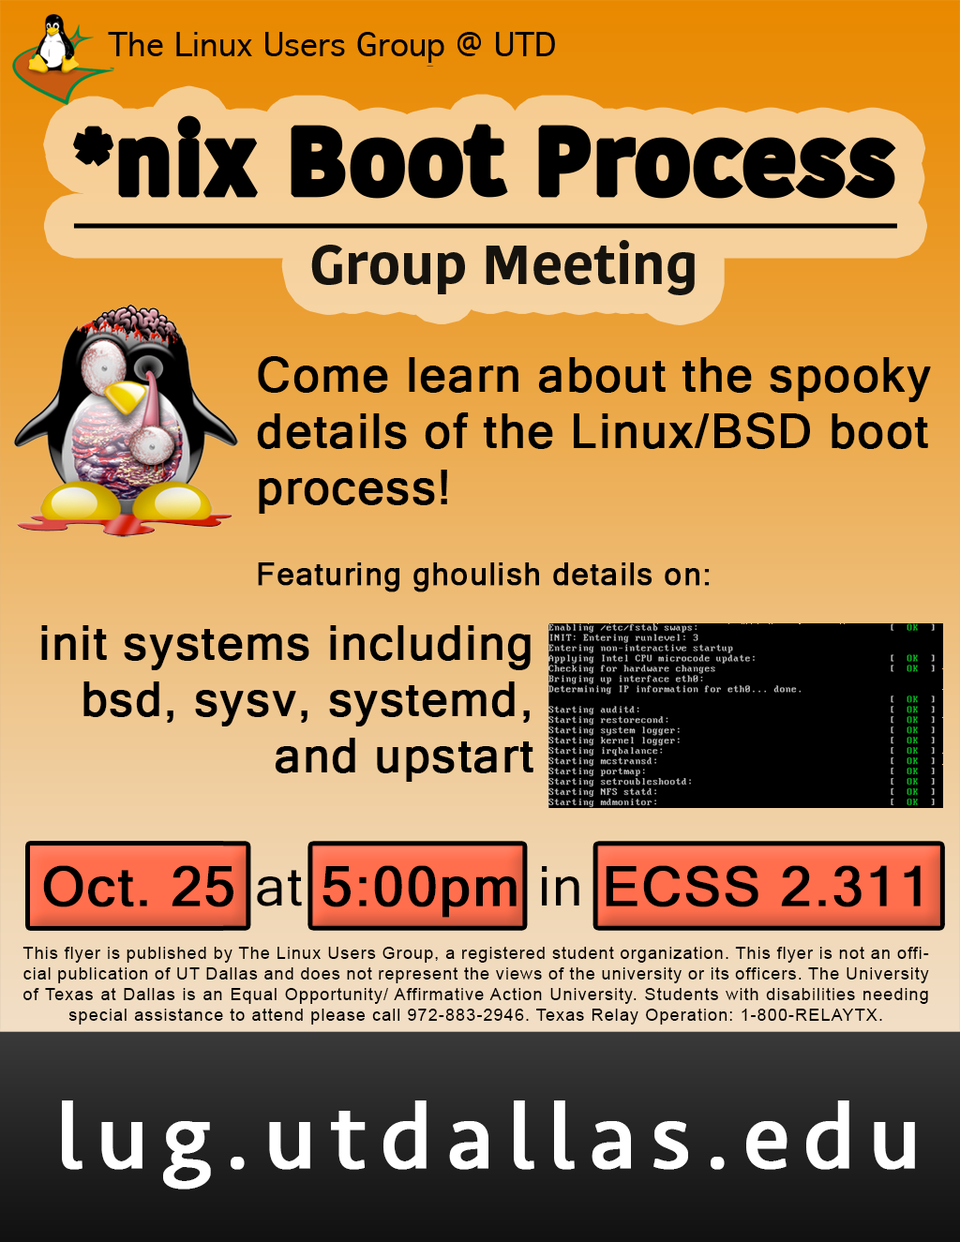
<style>
.page{position:relative;width:960px;height:1242px}
.page>*{position:absolute;margin:0}
.t1{font:31.2px "GenevaCY";color:#000000}
.t2{font:46.9px "MicrosoftSansSerif";letter-spacing:0.025em;color:#000000;font-weight:bold}
.t3{font:31.2px "MicrosoftSansSerif";letter-spacing:0.025em;color:#000000;font-weight:bold}
.t4{font:54.9px "MicrosoftSansSerif";letter-spacing:0.025em;color:#000000;font-weight:bold}
.t5{font:54.9px "MicrosoftSansSerif";letter-spacing:0.025em;color:#000000}
.t6{font:17.3px "ArialMT";letter-spacing:0.05em;color:#000000}
.t7{font:93.7px "Seravek";letter-spacing:0.13em;color:#ffffff;font-weight:bold}
</style>
<div class="page">
<p class="t1" style="left:108px;top:32px;width:447px;height:31px">The Linux Users Group @ UTD</p>
<p class="t2" style="left:257px;top:356px;width:674px;height:158px">Come learn about the spooky details of the Linux/BSD boot process!</p>
<p class="t3" style="left:258px;top:562px;width:452px;height:30px">Featuring ghoulish details on:</p>
<p class="t2" style="left:41px;top:625px;width:492px;height:157px;text-align:right">init systems including bsd, sysv, systemd, and upstart</p>
<p class="t4" style="left:43px;top:865px;width:878px;height:53px">Oct. 25 <span class="t5">at</span> 5:00pm <span class="t5">in</span> ECSS 2.311</p>
<p class="t6" style="left:22px;top:947px;width:907px;height:78px;text-align:justify">This flyer is published by The Linux Users Group, a registered student organization. This flyer is not an official publication of UT Dallas and does not represent the views of the university or its officers. The University of Texas at Dallas is an Equal Opportunity/ Affirmative Action University. Students with disabilities needing special assistance to attend please call 972-883-2946. Texas Relay Operation: 1-800-RELAYTX.</p>
<p class="t7" style="left:62px;top:1101px;width:853px;height:89px">lug.utdallas.edu</p>
</div>
